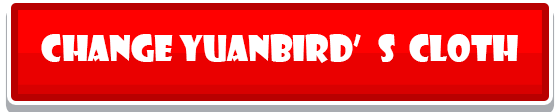
<style>
.page{position:relative;width:560px;height:112px;background:#ff0000}
.page>*{position:absolute;margin:0}
.t1{font:34px "ShowcardGothic-Reg";color:#ffffff}
</style>
<div class="page">
<p class="t1" style="left:41px;top:34px;width:477px;height:29px">Change YuanBird’s  Cloth</p>
</div>
